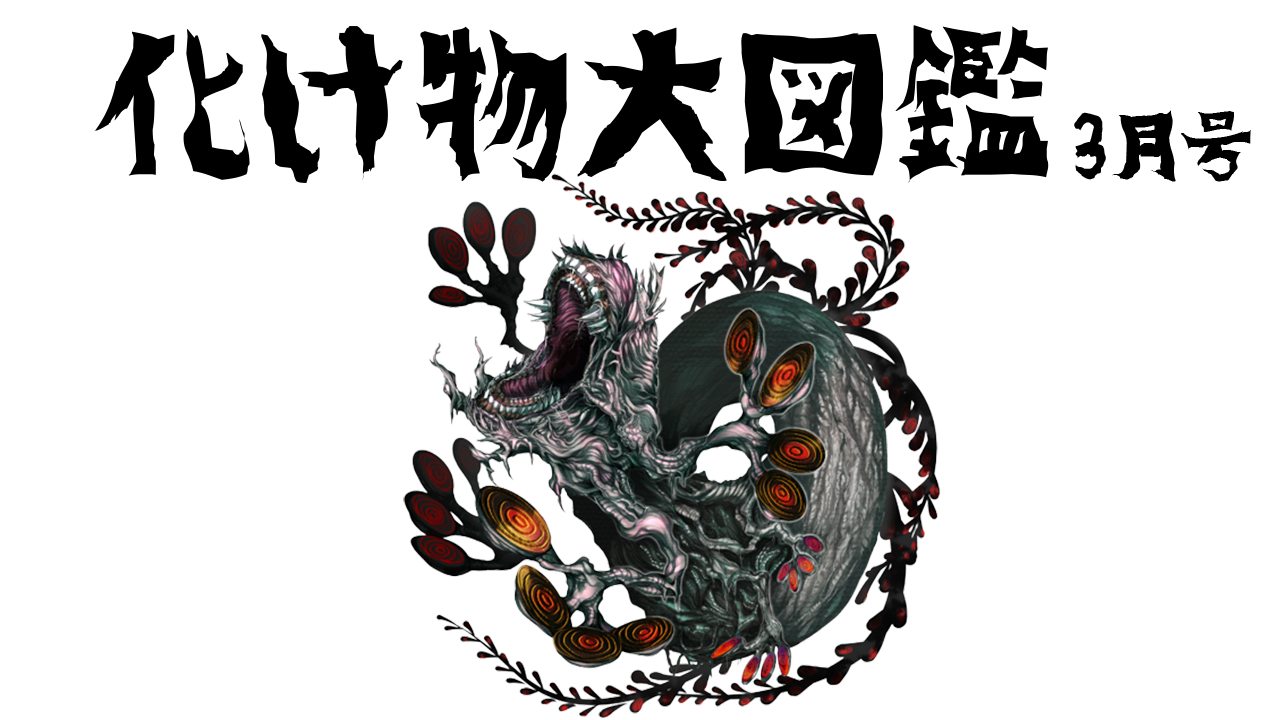
<style>
.page{position:relative;width:1280px;height:720px;background:#ffffff}
.page>*{position:absolute;margin:0}
.t1{font:160px "hakidame";color:#000000}
.t2{font:72px "hakidame";color:#000000}
</style>
<div class="page">
<p class="t1" style="left:94px;top:25px;width:955px;height:158px">化け物大図鑑</p>
<p class="t2" style="left:1074px;top:110px;width:177px;height:72px">3月号</p>
</div>
